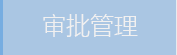
<style>
.page{position:relative;width:177px;height:55px;background:#aac6e3}
.page>*{position:absolute;margin:0}
.t1{font:24px "MicrosoftYaHeiLight";color:#f1f0f0}
</style>
<div class="page">
<p class="t1" style="left:43px;top:14px;width:95px;height:23px">审批管理</p>
</div>
